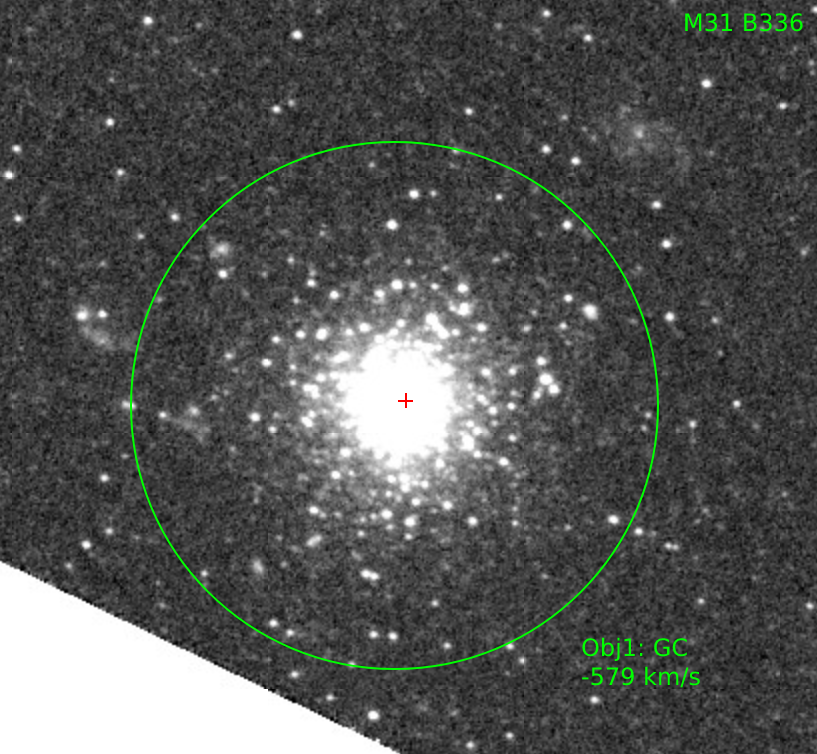
<style>
.page{position:relative;width:817px;height:754px}
.page>*{position:absolute;margin:0}
.t1{font:24px "DejaVuSans";color:#00ff00}
</style>
<div class="page">
<p class="t1" style="left:685px;top:13px;width:118px;height:19px">M31 B336</p>
<p class="t1" style="left:582px;top:637px;width:118px;height:51px">Obj1: GC<br>-579 km/s</p>
</div>
